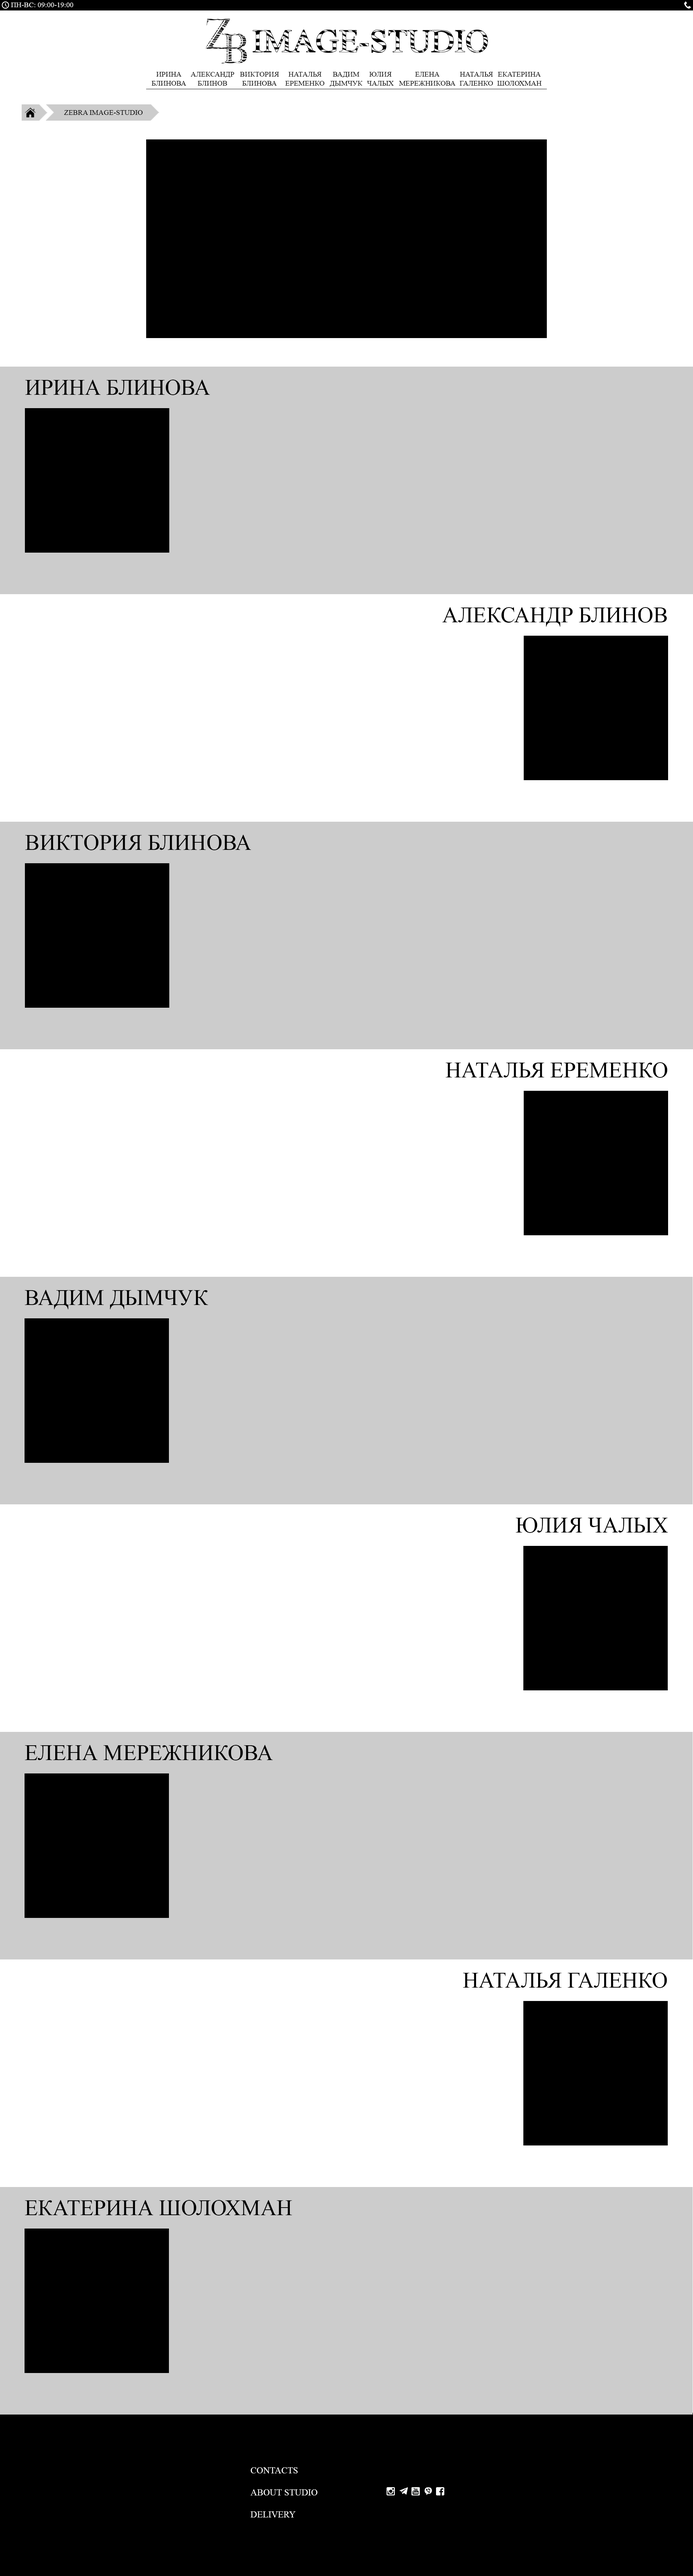
<style>
.page{position:relative;width:693px;height:2576px;background:#ffffff}
.page>*{position:absolute;margin:0}
.t1{font:7.3px "TimesNewRomanPSMT";color:#ffffff}
.t2{font:7.3px "TimesNewRomanPSMT";color:#000000;text-transform:uppercase}
.t3{font:22px "TimesNewRomanPSMT";color:#000000;text-transform:uppercase}
.t4{font:9.2px "TimesNewRomanPSMT";color:#ffffff;text-transform:uppercase}
</style>
<div class="page">
<p class="t1" style="left:11px;top:3px;width:62px;height:4px">ПН-ВС: 09:00-19:00</p>
<p class="t2" style="left:152px;top:72px;width:34px;height:14px;text-align:center">ирина<br>блинова</p>
<p class="t2" style="left:191px;top:72px;width:43px;height:14px;text-align:center">Александр<br>блинов</p>
<p class="t2" style="left:240px;top:72px;width:39px;height:14px;text-align:center">виктория<br>блинова</p>
<p class="t2" style="left:285px;top:72px;width:40px;height:14px;text-align:center">наталья<br>еременко</p>
<p class="t2" style="left:330px;top:72px;width:33px;height:15px;text-align:center">вадим<br>дымчук</p>
<p class="t2" style="left:367px;top:72px;width:27px;height:14px;text-align:center">юлия<br>чалых</p>
<p class="t2" style="left:399px;top:72px;width:57px;height:14px;text-align:center">елена<br>мережникова</p>
<p class="t2" style="left:460px;top:72px;width:33px;height:14px;text-align:center">наталья<br>галенко</p>
<p class="t2" style="left:497px;top:72px;width:45px;height:14px;text-align:center">екатерина<br>шолохман</p>
<p class="t2" style="left:64px;top:110px;width:79px;height:5px">zebra image-studio</p>
<p class="t3" style="left:25px;top:380px;width:185px;height:15px">ирина блинова</p>
<p class="t3" style="left:442px;top:607px;width:225px;height:20px">александр блинов</p>
<p class="t3" style="left:25px;top:835px;width:226px;height:15px">виктория блинова</p>
<p class="t3" style="left:446px;top:1062px;width:222px;height:16px">наталья еременко</p>
<p class="t3" style="left:25px;top:1290px;width:183px;height:19px">вадим дымчук</p>
<p class="t3" style="left:516px;top:1517px;width:153px;height:16px">юлия чалых</p>
<p class="t3" style="left:25px;top:1745px;width:248px;height:15px">елена мережникова</p>
<p class="t3" style="left:463px;top:1972px;width:204px;height:16px">наталья галенко</p>
<p class="t3" style="left:25px;top:2200px;width:267px;height:16px">екатерина шолохман</p>
<p class="t4" style="left:251px;top:2467px;width:67px;height:50px">Contacts<br><br>about studio<br><br>delivery</p>
</div>
